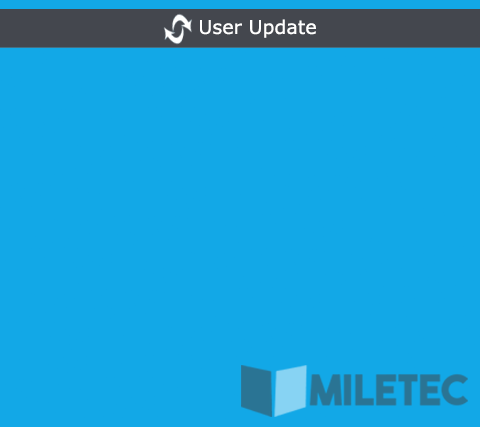
<style>
.page{position:relative;width:480px;height:427px;background:#12a8e7}
.page>*{position:absolute;margin:0}
.t1{font:18.9px "Verdana";color:#ffffff}
</style>
<div class="page">
<p class="t1" style="left:200px;top:19px;width:116px;height:19px">User Update</p>
</div>
